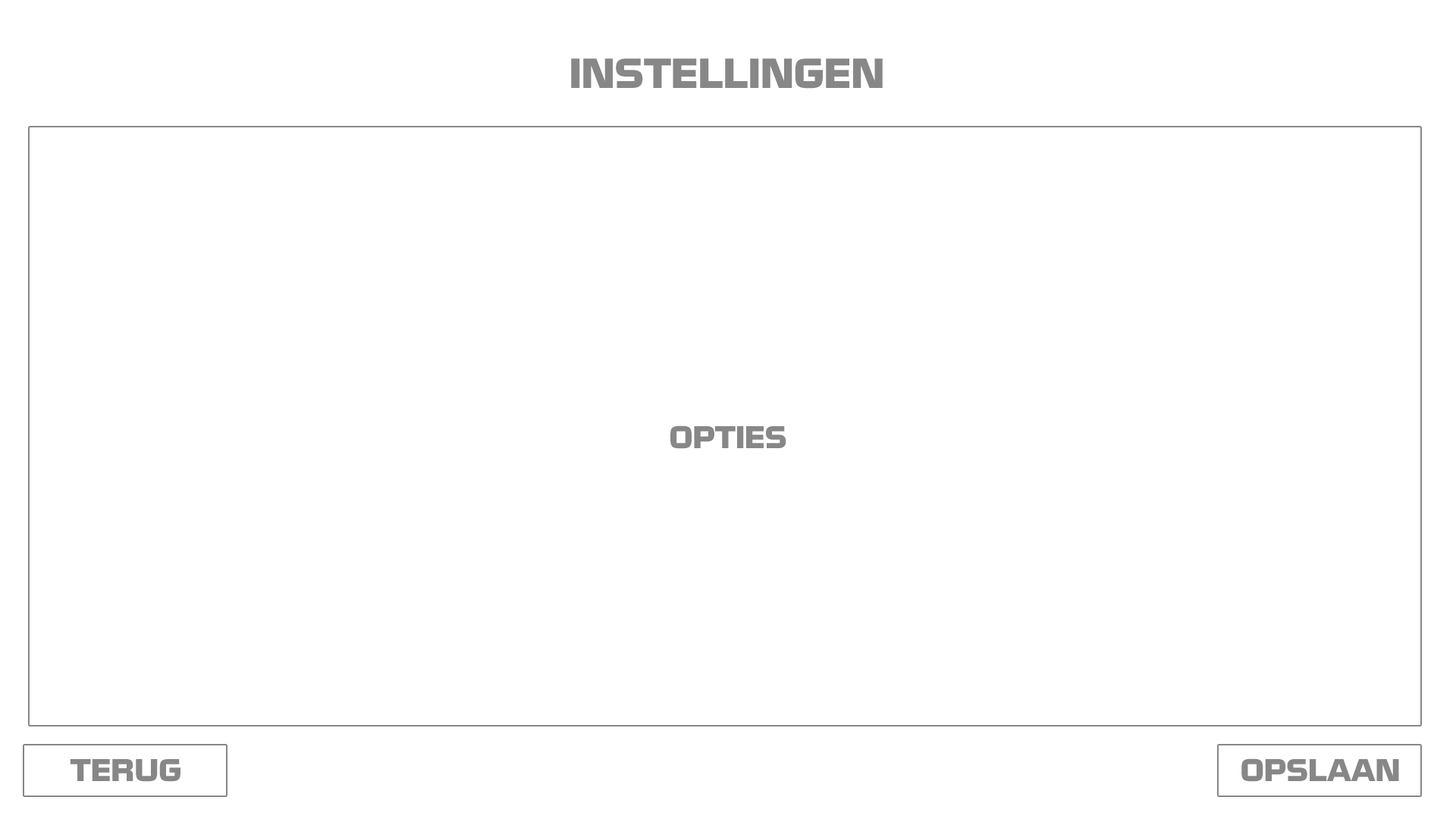
<style>
.page{position:relative;width:1456px;height:819px;background:#ffffff}
.page>*{position:absolute;margin:0}
.t1{font:36.4px "NissanOpti";color:#878787}
.t2{font:27.3px "NissanOpti";color:#878787}
</style>
<div class="page">
<p class="t1" style="left:571px;top:58px;width:312px;height:31px">INSTELLINGEN</p>
<p class="t2" style="left:670px;top:425px;width:116px;height:24px">OPTIES</p>
<p class="t2" style="left:70px;top:759px;width:110px;height:23px">TERUG</p>
<p class="t2" style="left:1241px;top:758px;width:158px;height:24px">OPSLAAN</p>
</div>
